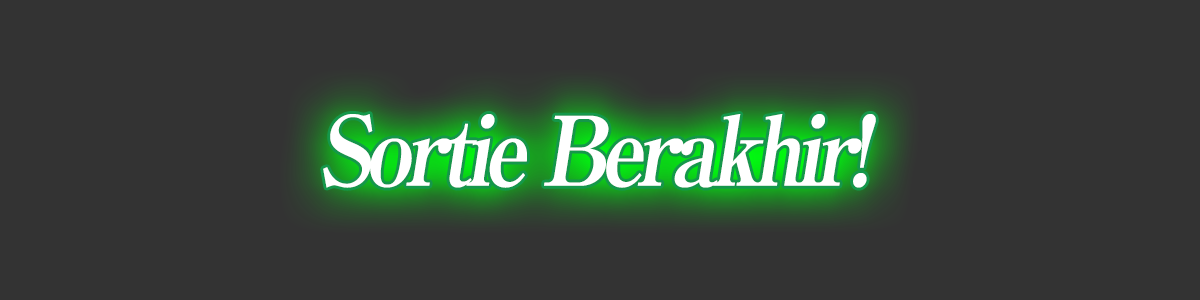
<style>
.page{position:relative;width:1200px;height:300px;background:#333333}
.page>*{position:absolute;margin:0}
.t1{font:96px "RyuminPro-ExBold";letter-spacing:-0.08em;color:#ffffff;font-style:italic;scale:0.9 1}
</style>
<div class="page">
<p class="t1" style="left:323px;top:114px;width:553px;height:74px">Sortie Berakhir!</p>
</div>
